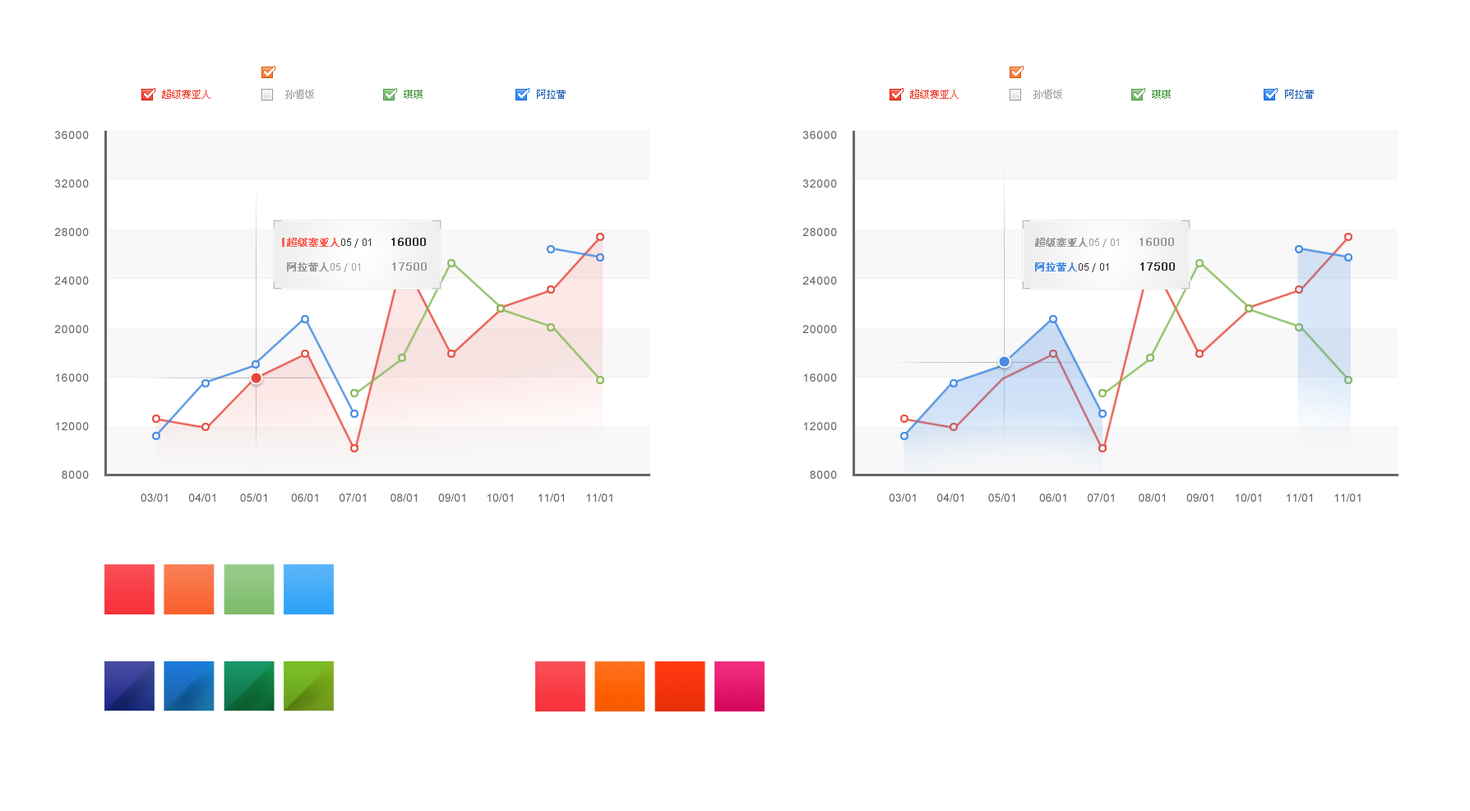
<style>
.page{position:relative;width:1470px;height:811px;background:#ffffff}
.page>*{position:absolute;margin:0}
.t1{font:9.9px "SimSun";color:#ed3321}
.t2{font:9.9px "SimSun";color:#999999}
.t3{font:9.9px "SimSun";color:#419739}
.t4{font:9.9px "SimSun";color:#215fb2}
.t5{font:11.5px/48.5px "ArialMT";letter-spacing:0.05em;color:#666666}
.t6{font:9.9px/24.7px "SimSun";color:#f96254;font-weight:bold}
.t7{font:9.9px/24.7px "ArialMT";color:#333333}
.t8{font:9.9px/24.7px "MicrosoftYaHei";color:#333333}
.t9{font:11.5px/24.7px "ArialMT";color:#333333;font-weight:bold}
.t10{font:9.9px/24.7px "SimSun";color:#999999;font-weight:bold}
.t11{font:9.9px/24.7px "ArialMT";color:#999999}
.t12{font:9.9px/24.7px "MicrosoftYaHei";color:#999999}
.t13{font:11.5px/24.7px "ArialMT";color:#999999;font-weight:bold}
.t14{font:9.9px/24.7px "SimSun";color:#478ce1;font-weight:bold}
.t15{font:11.5px "ArialMT";color:#666666}
</style>
<div class="page">
<p class="t1" style="left:162px;top:90px;width:404px;height:9px">超级赛亚人               <span class="t2">孙悟饭                  </span><span class="t3">琪琪                       </span><span class="t4">阿拉蕾</span></p>
<p class="t1" style="left:910px;top:90px;width:404px;height:9px">超级赛亚人               <span class="t2">孙悟饭                  </span><span class="t3">琪琪                       </span><span class="t4">阿拉蕾</span></p>
<p class="t5" style="left:54px;top:131px;width:35px;height:348px;text-align:right">36000<br>32000<br>28000<br>24000<br>20000<br>16000<br>12000<br>8000</p>
<p class="t5" style="left:803px;top:131px;width:34px;height:348px;text-align:right">36000<br>32000<br>28000<br>24000<br>20000<br>16000<br>12000<br>8000</p>
<p class="t6" style="left:287px;top:238px;width:140px;height:34px">超级塞亚人<span class="t7">05</span><span class="t8">／</span><span class="t7">01     </span><span class="t9">16000<br></span><span class="t10">阿拉蕾人</span><span class="t11">05</span><span class="t12">／</span><span class="t11">01           </span><span class="t13">17500</span></p>
<p class="t10" style="left:1035px;top:238px;width:140px;height:34px">超级塞亚人<span class="t11">05</span><span class="t12">／</span><span class="t11">01     </span><span class="t13">16000<br></span><span class="t14">阿拉蕾人</span><span class="t7">05</span><span class="t8">／</span><span class="t7">01           </span><span class="t9">17500</span></p>
<p class="t15" style="left:141px;top:493px;width:472px;height:9px">03/01      04/01       05/01       06/01      07/01       08/01      09/01      10/01       11/01      11/01</p>
<p class="t15" style="left:889px;top:493px;width:472px;height:9px">03/01      04/01       05/01       06/01      07/01       08/01      09/01      10/01       11/01      11/01</p>
</div>
